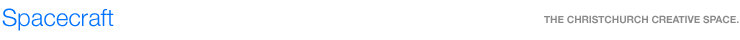
<style>
.page{position:relative;width:740px;height:40px;background:#ffffff}
.page>*{position:absolute;margin:0}
.t1{font:24px "HelveticaNeue-Light";color:#0072ff}
.t2{font:10px "HelveticaNeue-Bold";color:#8a8a8a;text-transform:uppercase}
</style>
<div class="page">
<p class="t1" style="left:2px;top:8px;width:112px;height:23px">Spacecraft</p>
<p class="t2" style="left:544px;top:15px;width:195px;height:9px">The Christchurch creative space.</p>
</div>
